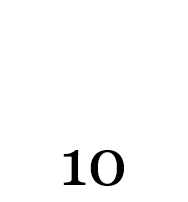
<style>
.page{position:relative;width:188px;height:202px;background:#ffffff}
.page>*{position:absolute;margin:0}
.t1{font:64.7px "Georgia";color:#000000}
</style>
<div class="page">
<p class="t1" style="left:63px;top:150px;width:61px;height:36px">10</p>
</div>
